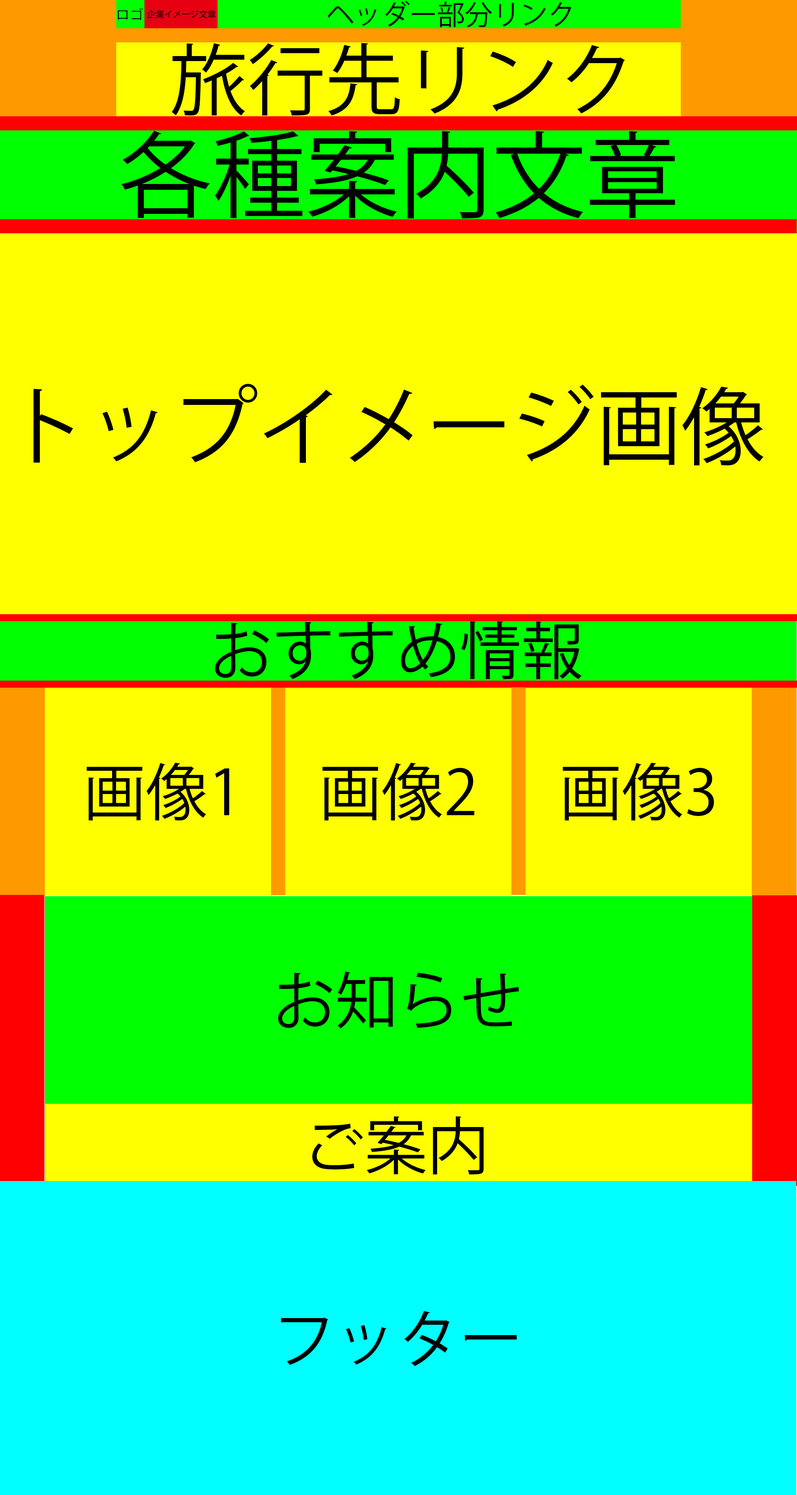
<style>
.page{position:relative;width:797px;height:1495px;background:#ffff00}
.page>*{position:absolute;margin:0}
.t1{font:27.7px "KozGoPr6N-Regular";color:#000000}
.t2{font:13.8px "KozGoPr6N-Regular";color:#000000}
.t3{font:8.7px "KozGoPr6N-Regular";color:#000000}
.t4{font:77.9px "KozGoPr6N-Regular";color:#000000}
.t5{font:93.5px "KozGoPr6N-Regular";color:#000000}
.t6{font:84.8px "KozGoPr6N-Regular";color:#000000}
.t7{font:62.3px "KozGoPr6N-Regular";color:#000000}
</style>
<div class="page">
<p class="t1" style="left:328px;top:0px;width:244px;height:27px">ヘッダー部分リンク</p>
<p class="t2" style="left:118px;top:7px;width:26px;height:13px">ロゴ</p>
<p class="t3" style="left:147px;top:10px;width:69px;height:8px">企業イメージ文章</p>
<p class="t4" style="left:172px;top:43px;width:454px;height:73px">旅行先リンク</p>
<p class="t5" style="left:121px;top:130px;width:555px;height:88px">各種案内文章</p>
<p class="t6" style="left:33px;top:384px;width:731px;height:82px">トップイメージ画像</p>
<p class="t7" style="left:215px;top:621px;width:367px;height:59px">おすすめ情報</p>
<p class="t7" style="left:86px;top:763px;width:144px;height:58px">画像1</p>
<p class="t7" style="left:322px;top:763px;width:153px;height:58px">画像2</p>
<p class="t7" style="left:563px;top:763px;width:151px;height:58px">画像3</p>
<p class="t7" style="left:278px;top:971px;width:242px;height:58px">お知らせ</p>
<p class="t7" style="left:312px;top:1116px;width:172px;height:59px">ご案内</p>
<p class="t7" style="left:281px;top:1311px;width:236px;height:56px">フッター</p>
</div>
